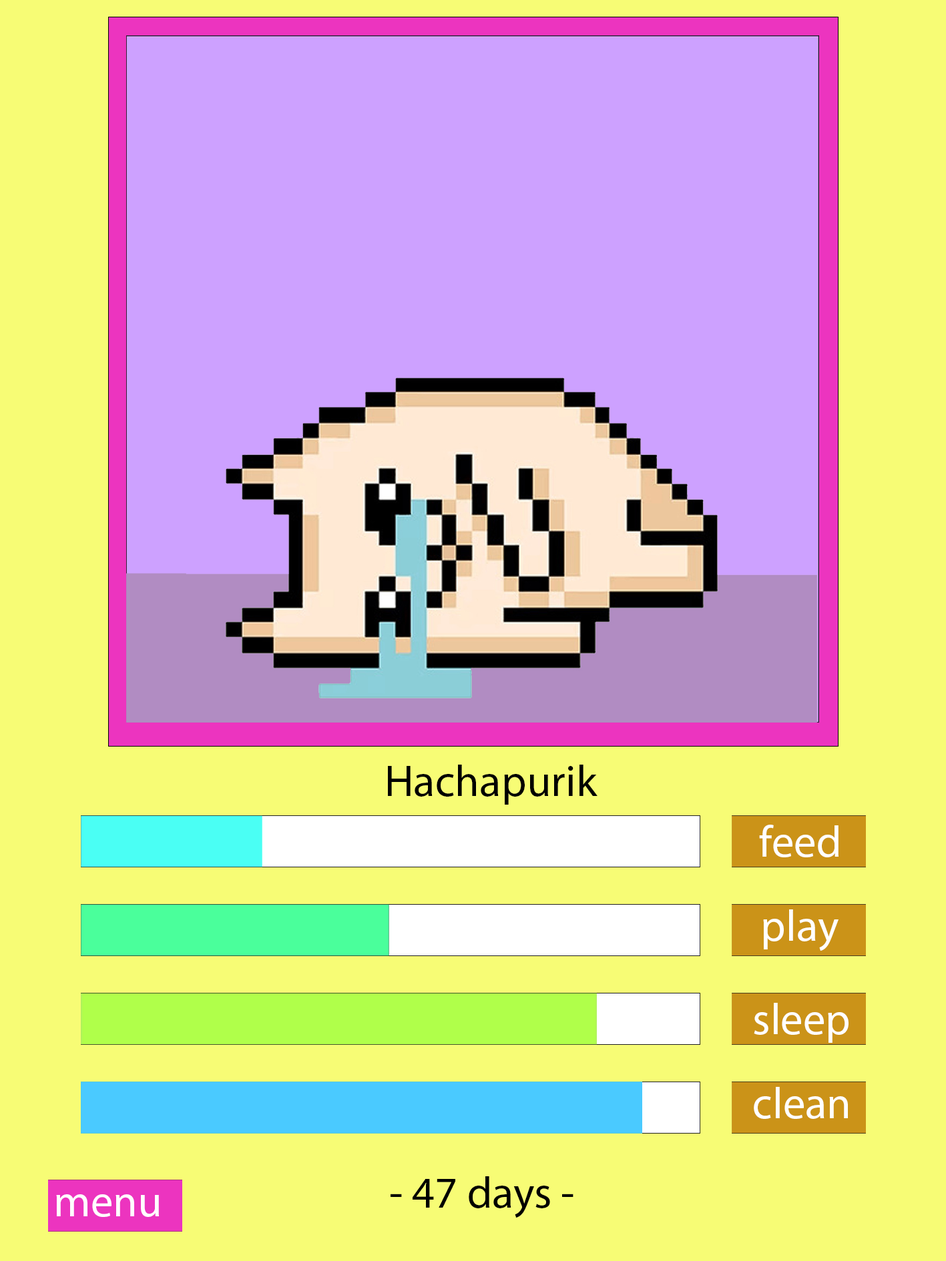
<style>
.page{position:relative;width:946px;height:1261px;background:#f7fc75}
.page>*{position:absolute;margin:0}
.t1{font:44.5px "MyriadPro-Regular";color:#000000}
.t2{font:44.5px "MyriadPro-Regular";color:#ffffff}
</style>
<div class="page">
<p class="t1" style="left:388px;top:765px;width:209px;height:40px">Hachapurik</p>
<p class="t2" style="left:759px;top:825px;width:79px;height:32px">feed</p>
<p class="t2" style="left:763px;top:909px;width:75px;height:42px">play</p>
<p class="t2" style="left:753px;top:1003px;width:95px;height:40px">sleep</p>
<p class="t2" style="left:753px;top:1087px;width:94px;height:32px">clean</p>
<p class="t1" style="left:390px;top:1176px;width:183px;height:42px">- 47 days -</p>
<p class="t2" style="left:56px;top:1194px;width:103px;height:23px">menu</p>
</div>
